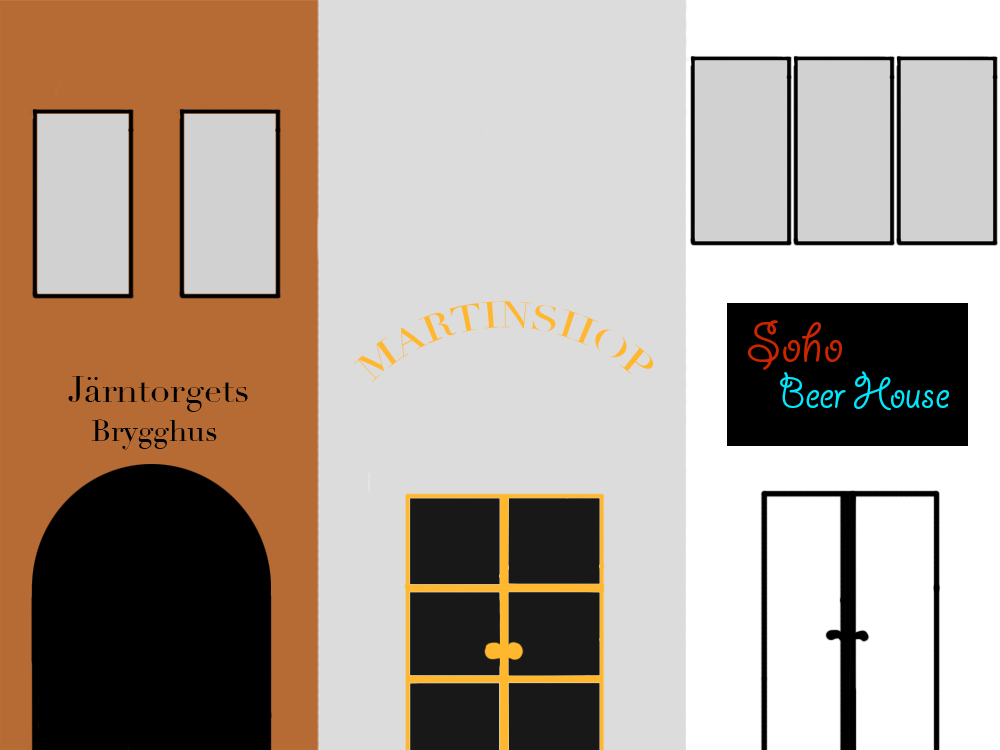
<style>
.page{position:relative;width:1000px;height:750px;background:#dcdcdc}
.page>*{position:absolute;margin:0}
.t1{font:36px "Didot";color:#ffb82e}
.t2{font:60px "GiddyupStd";color:#ca2600}
.t3{font:36px "Didot";color:#000000}
.t4{font:48px "GiddyupStd";color:#00e8fd}
</style>
<div class="page">
<p class="t1" style="left:353px;top:301px;width:301px;height:82px">MARTINSHOP</p>
<p class="t2" style="left:748px;top:320px;width:94px;height:50px">Soho</p>
<p class="t3" style="left:68px;top:376px;width:180px;height:36px">Järntorgets</p>
<p class="t4" style="left:780px;top:371px;width:169px;height:40px">Beer House</p>
</div>
